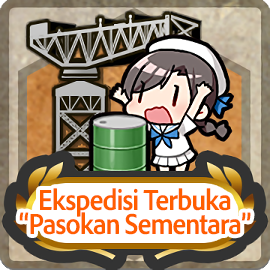
<style>
.page{position:relative;width:270px;height:270px}
.page>*{position:absolute;margin:0}
.t1{font:30px/24px "AdobeClean-Bold";letter-spacing:-0.04em;color:#ff5d00;scale:0.9 1}
</style>
<div class="page">
<p class="t1" style="left:19px;top:188px;width:232px;height:47px;text-align:center">Ekspedisi Terbuka<br>“Pasokan Sementara”</p>
</div>
